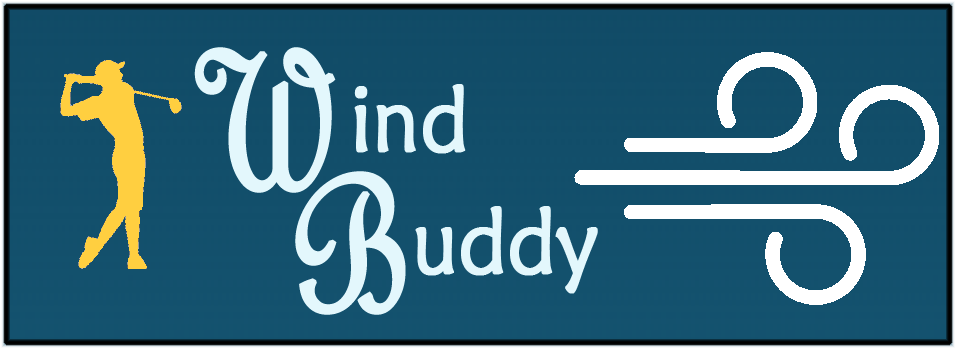
<style>
.page{position:relative;width:956px;height:349px}
.page>*{position:absolute;margin:0}
.t1{font:208.5px/122.2px "FrenchScriptMT";color:#e3f7fc;font-weight:bold;scale:0.87 1}
.t2{font:92.7px "MaiandraGD-Regular";color:#e3f7fc;font-weight:bold;scale:0.87 1}
</style>
<div class="page">
<p class="t1" style="left:194px;top:47px;width:212px;height:268px">W<br>  B</p>
<p class="t2" style="left:354px;top:84px;width:112px;height:70px">ind</p>
<p class="t2" style="left:415px;top:206px;width:183px;height:88px">uddy</p>
</div>
